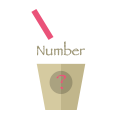
<style>
.page{position:relative;width:120px;height:120px;background:#ffffff}
.page>*{position:absolute;margin:0}
.t1{font:14.3px "Papyrus";color:#9a926f}
.t2{font:21.6px "Papyrus";color:#ea5279;scale:1.05 1}
</style>
<div class="page">
<p class="t1" style="left:36px;top:41px;width:49px;height:15px">Number</p>
<p class="t2" style="left:56px;top:74px;width:11px;height:16px">?</p>
</div>
